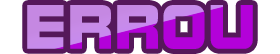
<style>
.page{position:relative;width:280px;height:54px;background:#55185a}
.page>*{position:absolute;margin:0}
.t1{font:69.3px "DFSoGeiStd-W9";scale:0.92 1}
</style>
<div class="page">
<p class="t1" style="left:27px;top:5px;width:226px;height:44px">ERROU</p>
</div>
